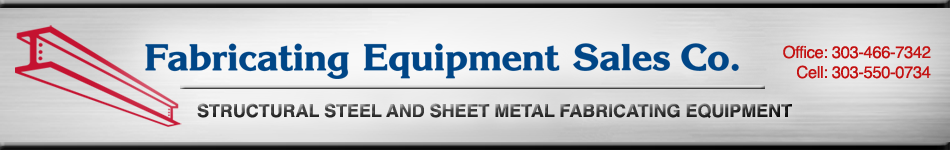
<style>
.page{position:relative;width:950px;height:150px}
.page>*{position:absolute;margin:0}
.t1{font:16.7px "Helvetica";letter-spacing:-0.025em;color:#c41212}
.t2{font:17.9px "Helvetica-Bold";color:#333333}
</style>
<div class="page">
<p class="t1" style="left:783px;top:45px;width:148px;height:34px;text-align:right">Office: 303-466-7342<br>Cell: 303-550-0734</p>
<p class="t2" style="left:197px;top:103px;width:595px;height:15px">STRUCTURAL STEEL AND SHEET METAL FABRICATING EQUIPMENT</p>
</div>
